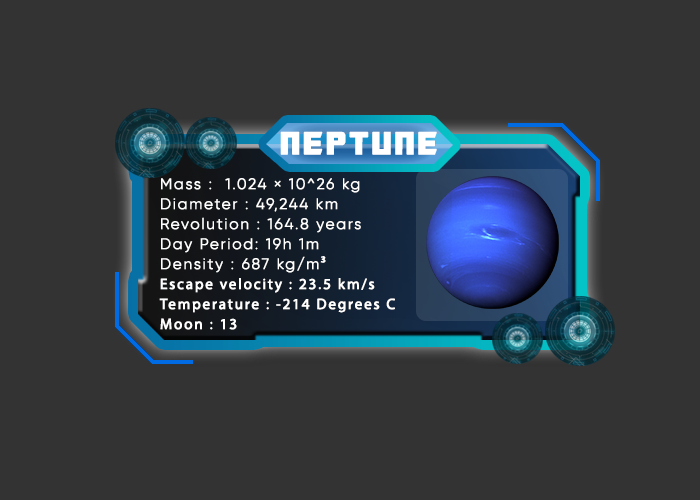
<style>
.page{position:relative;width:700px;height:500px;background:#333333}
.page>*{position:absolute;margin:0}
.t1{font:35px "TransformersMovie";letter-spacing:0.1em;color:#ffffff;font-weight:bold}
.t2{font:15px/20px "Gilroy-Light";letter-spacing:0.1em;color:#ffffff;font-weight:bold}
.t3{font:15px/20px "MyriadPro-Regular";letter-spacing:0.1em;color:#ffffff;font-weight:bold}
</style>
<div class="page">
<p class="t1" style="left:280px;top:131px;width:157px;height:24px">NEPTUNE</p>
<p class="t2" style="left:159px;top:178px;width:236px;height:152px">Mass :  1.024 × 10^26 kg<br>Diameter : 49,244 km<br>Revolution : 164.8 years<br>Day Period: 19h 1m<br>Density : 687 kg/m<span class="t3">³<br>Escape velocity : 23.5 km/s<br>Temperature : -214 Degrees C<br>Moon : 13</span></p>
</div>
